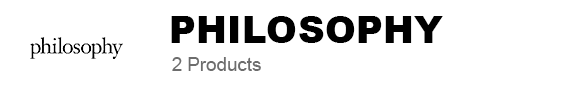
<style>
.page{position:relative;width:587px;height:95px;background:#ffffff}
.page>*{position:absolute;margin:0}
.t1{font:37.5px "Arial-Black";color:#000000}
.t2{font:18.7px "ArialMT";color:#6d6d6d}
</style>
<div class="page">
<p class="t1" style="left:171px;top:16px;width:272px;height:27px">PHILOSOPHY</p>
<p class="t2" style="left:172px;top:57px;width:89px;height:14px">2 Products</p>
</div>
